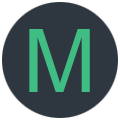
<style>
.page{position:relative;width:120px;height:120px;background:#2e363f}
.page>*{position:absolute;margin:0}
.t1{font:88px "ArialMT";letter-spacing:0.075em;color:#40bd84}
</style>
<div class="page">
<p class="t1" style="left:29px;top:29px;width:61px;height:63px">M</p>
</div>
